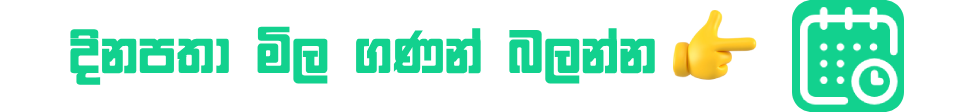
<style>
.page{position:relative;width:974px;height:112px;background:#ffffff}
.page>*{position:absolute;margin:0}
.t1{font:69px "SuPalitha";color:#12d18e}
</style>
<div class="page">
<p class="t1" style="left:70px;top:26px;width:585px;height:59px">Èkm;d ñ, .Kka n,kak</p>
</div>
